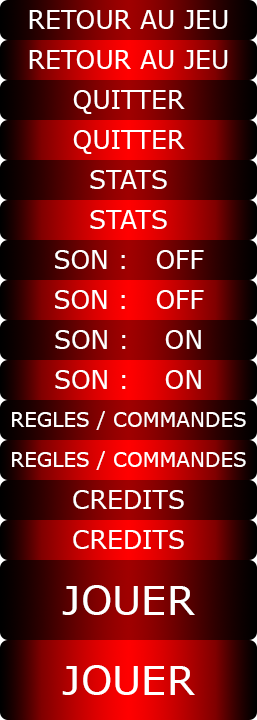
<style>
.page{position:relative;width:257px;height:720px}
.page>*{position:absolute;margin:0}
.t1{font:25px "Verdana";color:#ffffff}
.t2{font:20px "Verdana";color:#ffffff}
.t3{font:40px "Verdana";color:#ffffff}
</style>
<div class="page">
<p class="t1" style="left:29px;top:10px;width:199px;height:19px">RETOUR AU JEU</p>
<p class="t1" style="left:29px;top:50px;width:199px;height:19px">RETOUR AU JEU</p>
<p class="t1" style="left:73px;top:90px;width:112px;height:24px">QUITTER</p>
<p class="t1" style="left:73px;top:130px;width:112px;height:24px">QUITTER</p>
<p class="t1" style="left:90px;top:170px;width:77px;height:19px">STATS</p>
<p class="t1" style="left:90px;top:210px;width:77px;height:19px">STATS</p>
<p class="t1" style="left:55px;top:250px;width:149px;height:19px">SON :   OFF</p>
<p class="t1" style="left:55px;top:290px;width:149px;height:19px">SON :   OFF</p>
<p class="t1" style="left:55px;top:330px;width:146px;height:19px">SON :    ON</p>
<p class="t1" style="left:55px;top:370px;width:146px;height:19px">SON :    ON</p>
<p class="t2" style="left:12px;top:411px;width:234px;height:19px">REGLES / COMMANDES</p>
<p class="t2" style="left:12px;top:451px;width:234px;height:19px">REGLES / COMMANDES</p>
<p class="t1" style="left:73px;top:490px;width:111px;height:19px">CREDITS</p>
<p class="t1" style="left:73px;top:530px;width:111px;height:19px">CREDITS</p>
<p class="t3" style="left:62px;top:585px;width:133px;height:30px">JOUER</p>
<p class="t3" style="left:62px;top:665px;width:133px;height:30px">JOUER</p>
</div>
